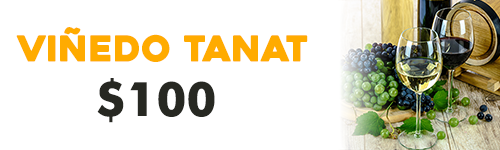
<style>
.page{position:relative;width:500px;height:150px;background:#ffffff}
.page>*{position:absolute;margin:0}
.t1{font:35.6px "Heavitas";color:#ffab00}
.t2{font:47.5px "FuturaBT-Bold";color:#272822}
</style>
<div class="page">
<p class="t1" style="left:16px;top:27px;width:292px;height:35px">VIÑEDO TANAT</p>
<p class="t2" style="left:97px;top:78px;width:118px;height:45px">$100</p>
</div>
